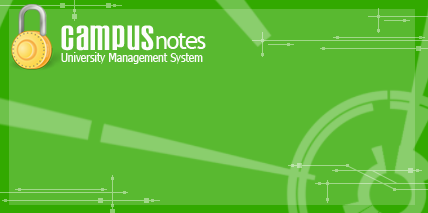
<style>
.page{position:relative;width:428px;height:213px;background:#59b930}
.page>*{position:absolute;margin:0}
.t1{font:36px "Establo";letter-spacing:0.05em;color:#fdfdfb}
.t2{font:24px "TrebuchetMS";letter-spacing:-0.075em;color:#fdfdfb}
.t3{font:12px "Nina";color:#fbfbfa}
</style>
<div class="page">
<p class="t1" style="left:61px;top:25px;width:93px;height:26px">Campus</p>
<p class="t2" style="left:156px;top:33px;width:50px;height:16px">notes</p>
<p class="t3" style="left:61px;top:52px;width:142px;height:12px">University Management System</p>
</div>
